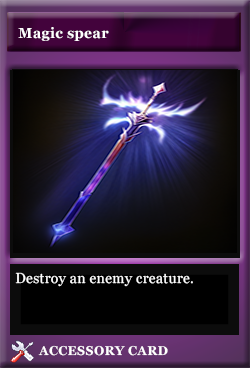
<style>
.page{position:relative;width:250px;height:368px}
.page>*{position:absolute;margin:0}
.t1{font:14.1px "Georgia-Bold";letter-spacing:0.025em;color:#ffffff}
.t2{font:14.1px "Georgia";letter-spacing:0.025em;color:#ffffff}
.t3{font:12.7px "Georgia-Bold";letter-spacing:0.025em;color:#ffffff}
</style>
<div class="page">
<p class="t1" style="left:18px;top:27px;width:91px;height:14px">Magic spear</p>
<p class="t2" style="left:15px;top:272px;width:178px;height:15px">Destroy an enemy creature.</p>
<p class="t3" style="left:38px;top:345px;width:130px;height:11px">ACCESSORY CARD</p>
</div>
